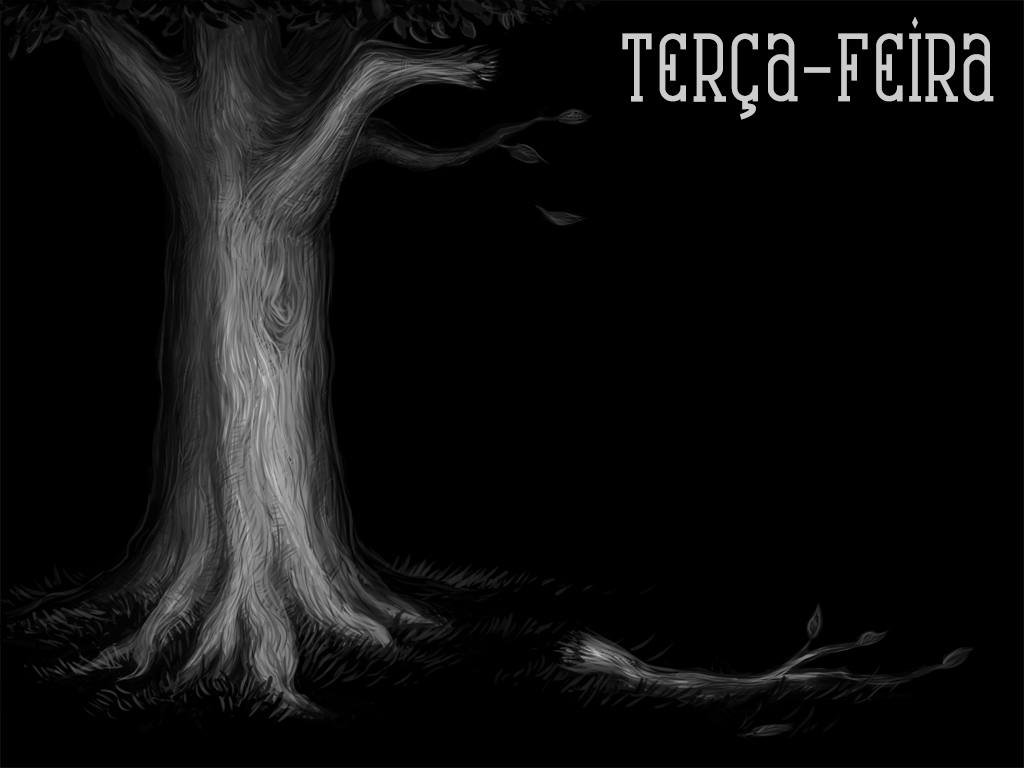
<style>
.page{position:relative;width:1024px;height:768px;background:#000000}
.page>*{position:absolute;margin:0}
.t1{font:104px "CatharsisRequiemBold";letter-spacing:-0.003em;color:#cccccc}
</style>
<div class="page">
<p class="t1" style="left:622px;top:17px;width:372px;height:103px">terça-feira</p>
</div>
